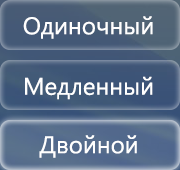
<style>
.page{position:relative;width:180px;height:170px}
.page>*{position:absolute;margin:0}
.t1{font:24px "SegoeUI";color:#ffffff}
</style>
<div class="page">
<p class="t1" style="left:23px;top:16px;width:130px;height:23px">Одиночный</p>
<p class="t1" style="left:25px;top:76px;width:128px;height:24px">Медленный</p>
<p class="t1" style="left:39px;top:135px;width:98px;height:23px">Двойной</p>
</div>
